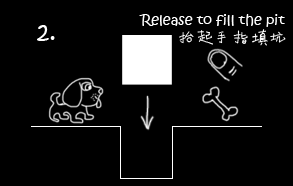
<style>
.page{position:relative;width:293px;height:186px;background:#000000}
.page>*{position:absolute;margin:0}
.t1{font:14px "KristenITC-Regular";color:#fefefe}
.t2{font:24px "KristenITC-Regular";color:#fefefe}
.t3{font:18px "Li-Xuke-Comic-Font";color:#fefefe}
</style>
<div class="page">
<p class="t1" style="left:139px;top:14px;width:146px;height:13px">Release to fill the pit</p>
<p class="t2" style="left:37px;top:25px;width:18px;height:16px">2.</p>
<p class="t3" style="left:179px;top:29px;width:107px;height:17px">抬起手指填坑</p>
</div>
